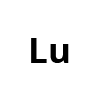
<style>
.page{position:relative;width:100px;height:100px;background:#ffffff}
.page>*{position:absolute;margin:0}
.t1{font:35px "OpenSans-Bold";color:#000000}
</style>
<div class="page">
<p class="t1" style="left:31px;top:38px;width:38px;height:25px">Lu</p>
</div>
